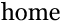
<style>
.page{position:relative;width:62px;height:22px;background:#ffffff}
.page>*{position:absolute;margin:0}
.t1{font:24px "Georgia";color:#000000}
</style>
<div class="page">
<p class="t1" style="left:1px;top:1px;width:59px;height:20px">home</p>
</div>
